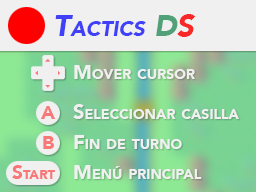
<style>
.page{position:relative;width:256px;height:192px;background:#f0f0f0}
.page>*{position:absolute;margin:0}
.t1{font:30px "Avenir-BlackOblique";color:#4040f8;font-variant:small-caps}
.t2{font:30px "Avenir-BlackOblique";color:#50a078;font-variant:small-caps}
.t3{font:30px "Avenir-BlackOblique";color:#f82828;font-variant:small-caps}
.t4{font:20px "Avenir-Black";color:#f0f0f0;font-variant:small-caps}
.t5{font:19px "Avenir-Black";color:#f87878;font-variant:small-caps}
</style>
<div class="page">
<p class="t1" style="left:55px;top:14px;width:141px;height:23px">Tactics <span class="t2">D</span><span class="t3">S</span></p>
<p class="t4" style="left:74px;top:65px;width:121px;height:14px">Mover cursor</p>
<p class="t5" style="left:41px;top:106px;width:15px;height:13px">A</p>
<p class="t4" style="left:73px;top:104px;width:166px;height:15px">Seleccionar casilla</p>
<p class="t5" style="left:43px;top:136px;width:11px;height:13px">B</p>
<p class="t4" style="left:74px;top:135px;width:108px;height:14px">Fin de turno</p>
<p class="t5" style="left:12px;top:165px;width:43px;height:14px">Start</p>
<p class="t4" style="left:74px;top:165px;width:128px;height:14px">Menú principal</p>
</div>
